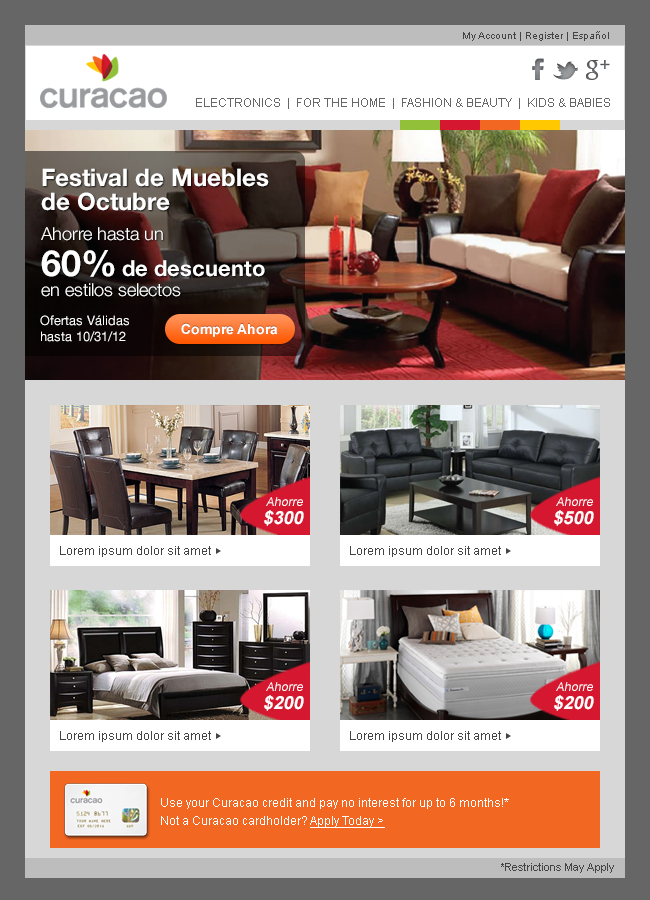
<style>
.page{position:relative;width:650px;height:900px}
.page>*{position:absolute;margin:0}
.t1{font:10px "ArialMT";color:#444444}
.t2{font:12px "ArialMT";color:#666666}
.t3{font:24px/30px "HelveticaNeue-Bold";color:#ffffff}
.t4{font:24px/24px "HelveticaNeue-Bold";color:#ffffff}
.t5{font:18px/30px "HelveticaNeue-Light";color:#ffffff}
.t6{font:36px/36px "HelveticaNeue-Bold";color:#ffffff}
.t7{font:22px/36px "HelveticaNeue-Bold";color:#ffffff}
.t8{font:18px/20px "HelveticaNeue-Light";color:#ffffff}
.t9{font:13px/16px "HelveticaNeue-Roman";color:#ffffff}
.t10{font:12px/18px "ArialMT";color:#fefefe;font-style:italic}
.t11{font:18px/18px "Arial-BoldMT";color:#fefefe;font-style:italic}
.t12{font:12px "ArialMT";color:#444444}
.t13{font:12px/18px "ArialMT";color:#ffffff}
.t14{font:12px/18px "ArialMT";color:#ffffff;text-decoration:underline}
.t15{font:11px "ArialMT";color:#444444}
</style>
<div class="page">
<p class="t1" style="left:463px;top:31px;width:146px;height:10px">My Account | Register | Español</p>
<p class="t2" style="left:196px;top:98px;width:414px;height:11px">ELECTRONICS  |  FOR THE HOME  |  FASHION &amp; BEAUTY  |  KIDS &amp; BABIES</p>
<p class="t3" style="left:41px;top:168px;width:228px;height:129px">Festival de Muebles <span class="t4">de Octubre<br></span><span class="t5">Ahorre hasta un <br></span><span class="t6">60% </span><span class="t7">de descuento<br></span><span class="t8">en estilos selectos</span></p>
<p class="t9" style="left:40px;top:315px;width:89px;height:27px">Ofertas Válidas<br>hasta 10/31/12</p>
<p class="t10" style="left:264px;top:497px;width:40px;height:29px;text-align:right">Ahorre<br><span class="t11">$300</span></p>
<p class="t10" style="left:554px;top:497px;width:40px;height:29px;text-align:right">Ahorre<br><span class="t11">$500</span></p>
<p class="t12" style="left:60px;top:546px;width:151px;height:11px">Lorem ipsum dolor sit amet</p>
<p class="t12" style="left:350px;top:546px;width:151px;height:11px">Lorem ipsum dolor sit amet</p>
<p class="t10" style="left:264px;top:682px;width:40px;height:29px;text-align:right">Ahorre<br><span class="t11">$200</span></p>
<p class="t10" style="left:554px;top:682px;width:40px;height:29px;text-align:right">Ahorre<br><span class="t11">$200</span></p>
<p class="t12" style="left:60px;top:731px;width:151px;height:11px">Lorem ipsum dolor sit amet</p>
<p class="t12" style="left:350px;top:731px;width:151px;height:11px">Lorem ipsum dolor sit amet</p>
<p class="t13" style="left:161px;top:798px;width:348px;height:30px">Use your Curacao credit and pay no interest for up to 6 months!*<br>Not a Curacao cardholder? <span class="t14">Apply Today &gt;</span></p>
<p class="t15" style="left:501px;top:863px;width:113px;height:10px">*Restrictions May Apply</p>
</div>
